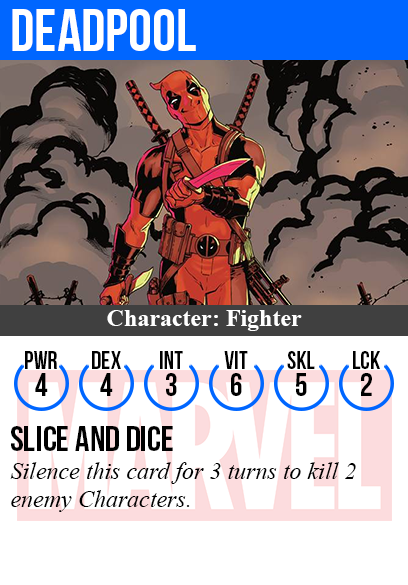
<style>
.page{position:relative;width:408px;height:585px;background:#ffffff}
.page>*{position:absolute;margin:0}
.t1{font:60px "BebasNeue";color:#ffffff}
.t2{font:24px "TimesNewRomanPS-BoldMT";color:#ffffff}
.t3{font:25px "BebasNeue";color:#000000}
.t4{font:32px "BebasNeue";color:#000000}
.t5{font:36px "BebasNeue";color:#000000}
.t6{font:24px "TimesNewRomanPS-ItalicMT";color:#000000}
</style>
<div class="page">
<p class="t1" style="left:12px;top:9px;width:184px;height:42px">deadpool</p>
<p class="t2" style="left:107px;top:310px;width:195px;height:21px">Character: Fighter</p>
<p class="t3" style="left:25px;top:351px;width:32px;height:18px">PWR</p>
<p class="t3" style="left:92px;top:351px;width:29px;height:18px">dex</p>
<p class="t3" style="left:160px;top:351px;width:23px;height:18px">int</p>
<p class="t3" style="left:224px;top:351px;width:24px;height:18px">vit</p>
<p class="t3" style="left:287px;top:351px;width:28px;height:18px">skl</p>
<p class="t3" style="left:353px;top:351px;width:27px;height:18px">lck</p>
<p class="t4" style="left:35px;top:373px;width:13px;height:23px">4</p>
<p class="t4" style="left:100px;top:373px;width:13px;height:23px">4</p>
<p class="t4" style="left:166px;top:373px;width:11px;height:23px">3</p>
<p class="t4" style="left:231px;top:373px;width:11px;height:23px">6</p>
<p class="t4" style="left:296px;top:373px;width:11px;height:23px">5</p>
<p class="t4" style="left:361px;top:373px;width:11px;height:23px">2</p>
<p class="t5" style="left:11px;top:426px;width:162px;height:25px">slice and dice</p>
<p class="t6" style="left:10px;top:462px;width:346px;height:50px">Silence this card for 3 turns to kill 2<br>enemy Characters.</p>
</div>
